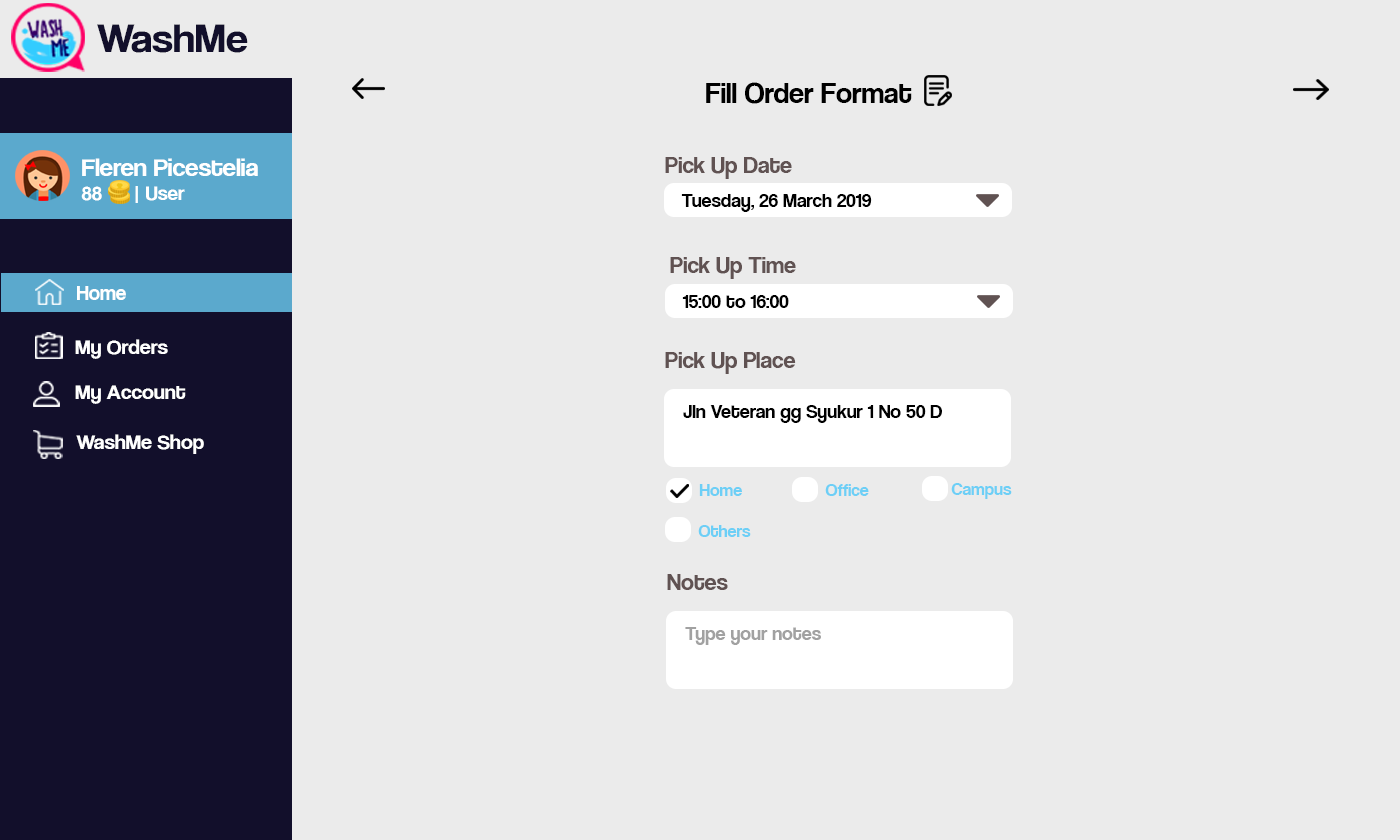
<style>
.page{position:relative;width:1400px;height:840px;background:#ebebeb}
.page>*{position:absolute;margin:0}
.t1{font:42.1px "CoolveticaRg-Regular";color:#120f2b;scale:1.05 1}
.t2{font:30px "CoolveticaRg-Regular";color:#000000}
.t3{font:25.2px "CoolveticaRg-Regular";color:#ffffff;scale:1.05 1}
.t4{font:20px "CoolveticaRg-Regular";color:#ffffff;scale:1.05 1}
.t5{font:24px "CoolveticaRg-Regular";color:#605252}
.t6{font:20px "CoolveticaRg-Regular";color:#000000}
.t7{font:21px "CoolveticaRg-Regular";color:#ffffff}
.t8{font:21px "CoolveticaRg-Regular";color:#ffffff;scale:1.05 1}
.t9{font:18px "CoolveticaRg-Regular";color:#6dcff6}
.t10{font:20px "CoolveticaRg-Regular";color:#a1a1a1}
</style>
<div class="page">
<p class="t1" style="left:97px;top:24px;width:151px;height:29px">WashMe</p>
<p class="t2" style="left:706px;top:82px;width:206px;height:22px">Fill Order Format</p>
<p class="t3" style="left:81px;top:158px;width:177px;height:45px">Fleren Picestelia<br><span class="t4">88      | User</span></p>
<p class="t5" style="left:665px;top:157px;width:127px;height:22px">Pick Up Date</p>
<p class="t6" style="left:681px;top:194px;width:191px;height:18px">Tuesday, 26 March 2019</p>
<p class="t5" style="left:670px;top:257px;width:126px;height:22px">Pick Up Time</p>
<p class="t7" style="left:77px;top:286px;width:49px;height:14px">Home</p>
<p class="t6" style="left:682px;top:295px;width:107px;height:13px">15:00 to 16:00</p>
<p class="t8" style="left:75px;top:339px;width:93px;height:20px">My Orders</p>
<p class="t5" style="left:665px;top:352px;width:131px;height:22px">Pick Up Place</p>
<p class="t8" style="left:75px;top:385px;width:111px;height:19px">My Account</p>
<p class="t6" style="left:683px;top:405px;width:259px;height:18px">Jln Veteran gg Syukur 1 No 50 D</p>
<p class="t8" style="left:76px;top:434px;width:128px;height:20px">WashMe Shop</p>
<p class="t9" style="left:699px;top:484px;width:43px;height:12px">Home</p>
<p class="t9" style="left:825px;top:484px;width:44px;height:12px">Office</p>
<p class="t9" style="left:951px;top:483px;width:61px;height:16px">Campus</p>
<p class="t9" style="left:698px;top:525px;width:53px;height:12px">Others</p>
<p class="t5" style="left:667px;top:574px;width:61px;height:16px">Notes</p>
<p class="t10" style="left:685px;top:627px;width:136px;height:18px">Type your notes</p>
</div>
